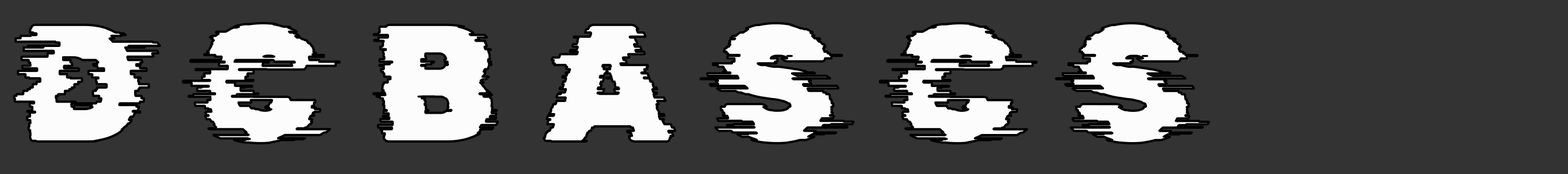
<style>
.page{position:relative;width:1568px;height:174px;background:#333333}
.page>*{position:absolute;margin:0}
.t1{font:166.9px "RubikGlitch-Regular";color:#fdfcfd}
</style>
<div class="page">
<p class="t1" style="left:14px;top:24px;width:146px;height:118px">D</p>
<p class="t1" style="left:183px;top:23px;width:157px;height:120px">C</p>
<p class="t1" style="left:373px;top:24px;width:125px;height:118px">B</p>
<p class="t1" style="left:544px;top:24px;width:131px;height:118px">A</p>
<p class="t1" style="left:700px;top:23px;width:154px;height:120px">S</p>
<p class="t1" style="left:880px;top:23px;width:157px;height:120px">C</p>
<p class="t1" style="left:1056px;top:23px;width:153px;height:120px">S</p>
</div>
